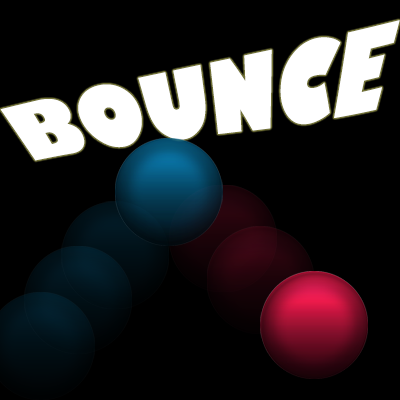
<style>
.page{position:relative;width:400px;height:400px;background:#000000}
.page>*{position:absolute;margin:0}
.t1{font:94.2px "GillSans-UltraBold";color:#ffffff;text-transform:uppercase;scale:0.79 1}
</style>
<div class="page">
<p class="t1" style="left:0px;top:20px;width:400px;height:141px;rotate:-10deg">Bounce</p>
</div>
